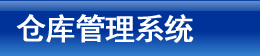
<style>
.page{position:relative;width:260px;height:56px}
.page>*{position:absolute;margin:0}
.t1{font:30px "SimHei";letter-spacing:-0.04em;color:#fefefd;font-weight:bold}
</style>
<div class="page">
<p class="t1" style="left:16px;top:14px;width:178px;height:29px">仓库管理系统</p>
</div>
